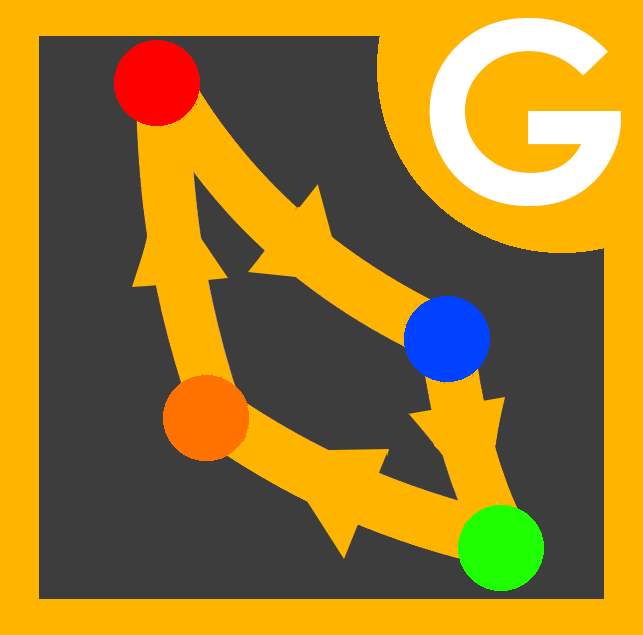
<style>
.page{position:relative;width:643px;height:635px;background:#3d3d3d}
.page>*{position:absolute;margin:0}
.t1{font:250.1px "CenturyGothic-Bold";color:#ffffff}
</style>
<div class="page">
<p class="t1" style="left:429px;top:17px;width:192px;height:189px">G</p>
</div>
